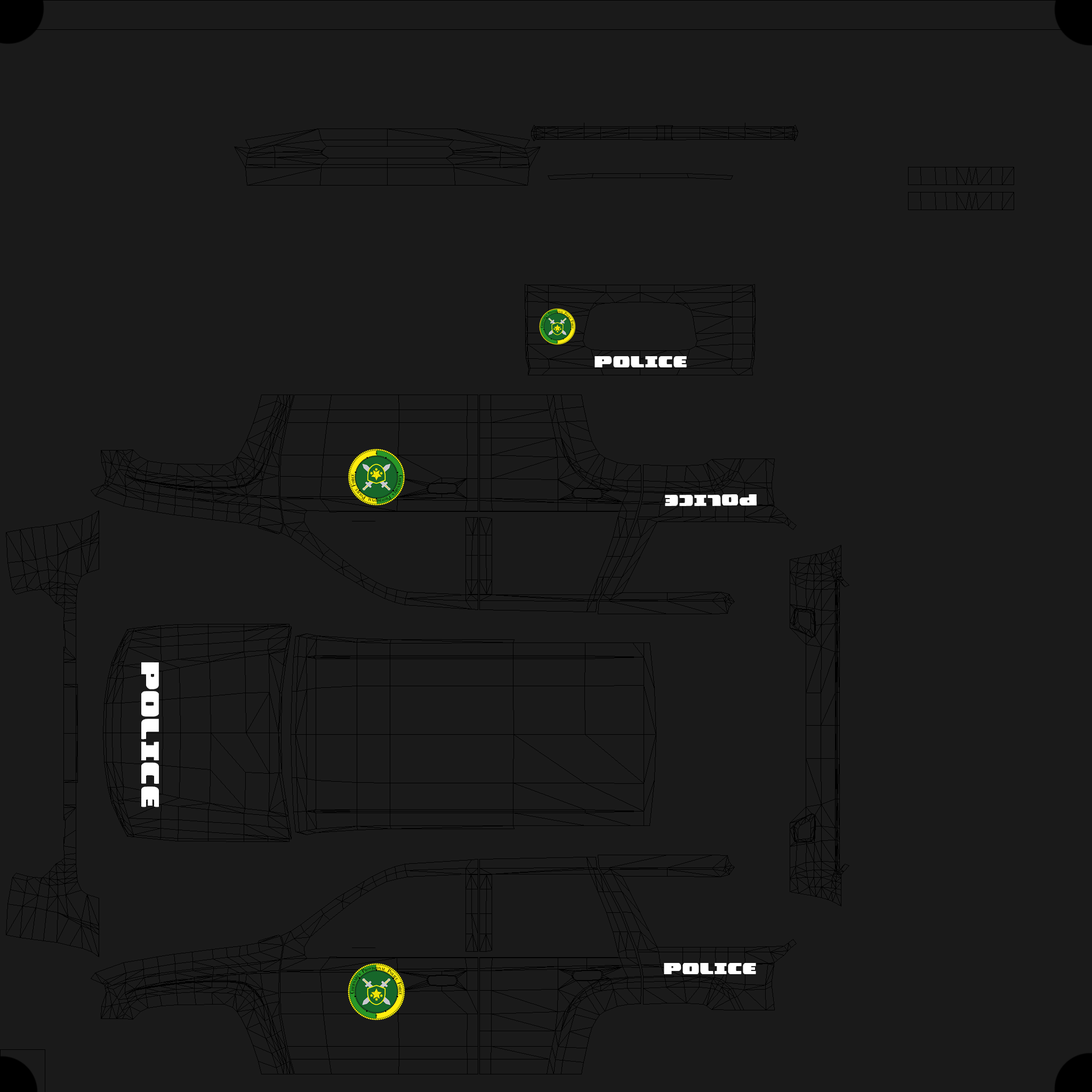
<style>
.page{position:relative;width:1092px;height:1092px;background:#1a1a1a}
.page>*{position:absolute;margin:0}
.t1{font:32px "PoliceCruiser";color:#ffffff;text-transform:uppercase}
.t2{font:50.7px "PoliceCruiser";color:#ffffff;text-transform:uppercase}
</style>
<div class="page">
<p class="t1" style="left:595px;top:356px;width:92px;height:11px">police</p>
<p class="t1" style="left:665px;top:494px;width:92px;height:12px;rotate:179deg">police</p>
<p class="t2" style="left:141px;top:662px;width:18px;height:145px;rotate:90deg">POLICE</p>
<p class="t1" style="left:664px;top:963px;width:92px;height:11px">police</p>
</div>
